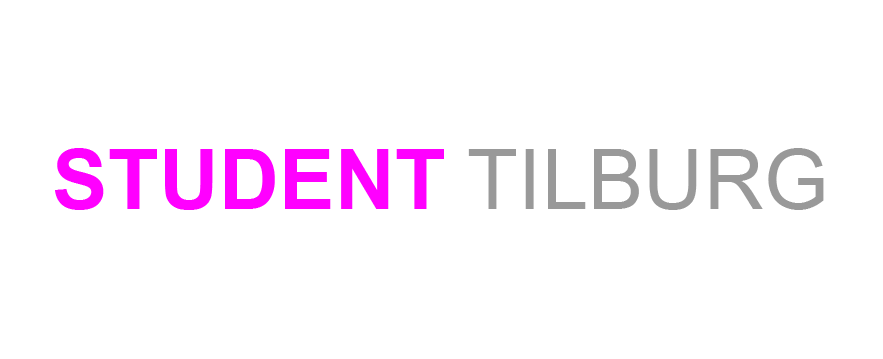
<style>
.page{position:relative;width:883px;height:359px;background:#ffffff}
.page>*{position:absolute;margin:0}
.t1{font:83.3px "Arial-BoldMT";color:#ff00ff}
.t2{font:83.3px "ArialMT";color:#999999}
</style>
<div class="page">
<p class="t1" style="left:55px;top:148px;width:769px;height:62px">STUDENT <span class="t2">TILBURG</span></p>
</div>
